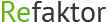
<style>
.page{position:relative;width:112px;height:22px;background:#ffffff}
.page>*{position:absolute;margin:0}
.t1{font:30px "PTSans-Regular";color:#333333}
.t2{font:30px "PTSans-Regular";color:#5fb611}
</style>
<div class="page">
<p class="t1" style="left:2px;top:1px;width:104px;height:21px"><span class="t2">Re</span>faktor</p>
</div>
